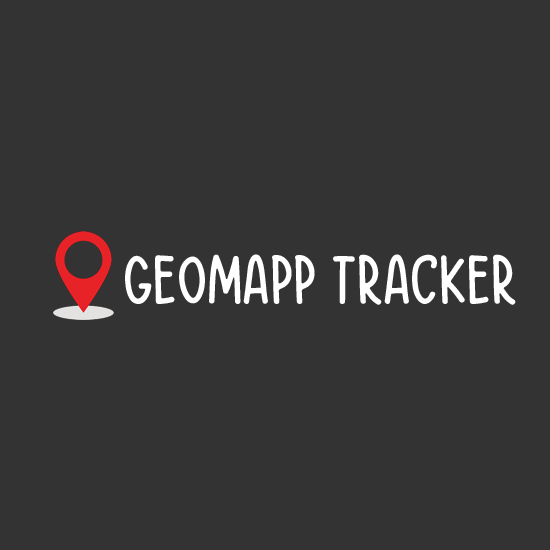
<style>
.page{position:relative;width:550px;height:550px;background:#333333}
.page>*{position:absolute;margin:0}
.t1{font:70px "ThinkBig";color:#ffffff}
</style>
<div class="page">
<p class="t1" style="left:125px;top:254px;width:391px;height:51px">GeoMapp Tracker</p>
</div>
